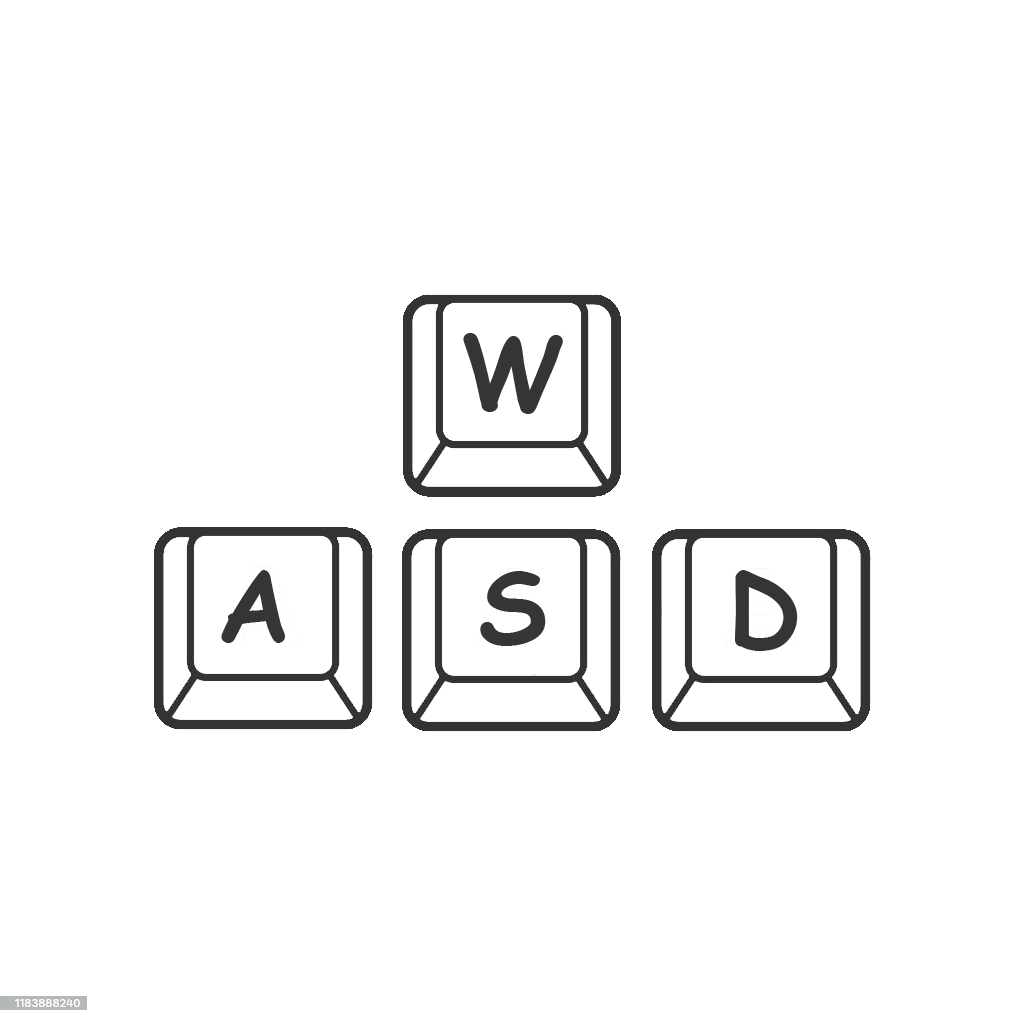
<style>
.page{position:relative;width:1024px;height:1024px;background:#ffffff}
.page>*{position:absolute;margin:0}
.t1{font:100px "ComicSansMS-Bold";color:#353535}
.t2{font:100px "ComicSansMS-Bold";color:#363636}
</style>
<div class="page">
<p class="t1" style="left:463px;top:333px;width:100px;height:81px">W</p>
<p class="t1" style="left:221px;top:570px;width:64px;height:73px">A</p>
<p class="t2" style="left:480px;top:571px;width:66px;height:75px">S</p>
<p class="t1" style="left:735px;top:570px;width:63px;height:81px">D</p>
</div>
